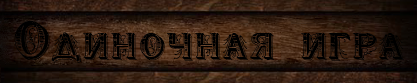
<style>
.page{position:relative;width:417px;height:83px}
.page>*{position:absolute;margin:0}
.t1{font:49.3px "WoodenShipDecorated";color:#000000}
</style>
<div class="page">
<p class="t1" style="left:14px;top:21px;width:390px;height:42px">Одиночная игра</p>
</div>
